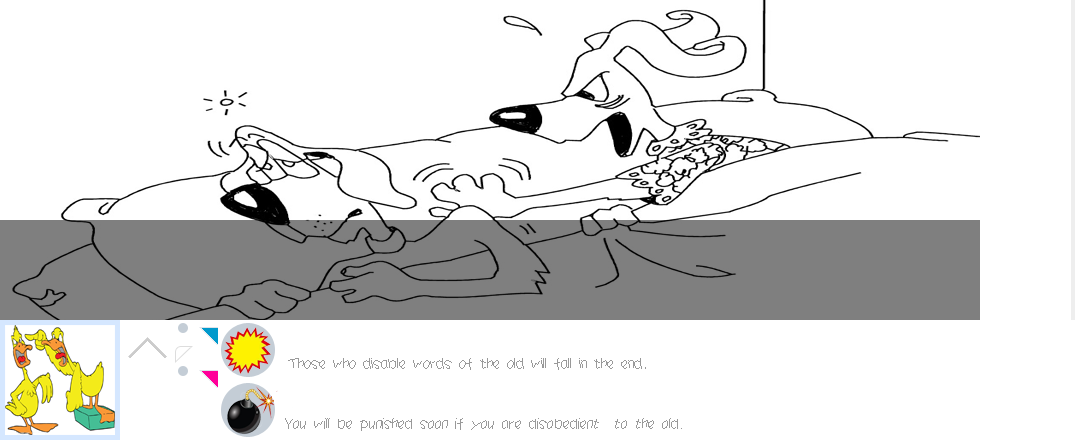
<style>
.page{position:relative;width:1075px;height:440px;background:#ffffff}
.page>*{position:absolute;margin:0}
.t1{font:16px "JYaYa";color:#999999;scale:0.9 1}
.t2{font:16px "JYaYa";color:#999999;font-style:italic;scale:0.9 1}
</style>
<div class="page">
<p class="t1" style="left:288px;top:358px;width:358px;height:12px">Those who disable words of the old will fall in the end.</p>
<p class="t2" style="left:285px;top:418px;width:397px;height:13px">You will be punished soon if you are disobedient  to the old.</p>
</div>
